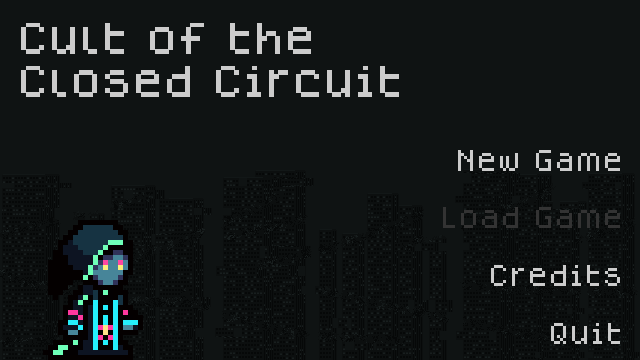
<style>
.page{position:relative;width:640px;height:360px;background:#0f1313}
.page>*{position:absolute;margin:0}
.t1{font:36px "Dogica_Pixel";color:#cccccc}
.t2{font:24px "Dogica_Pixel";color:#cccccc}
.t3{font:24px "Dogica_Pixel";color:#333333}
</style>
<div class="page">
<p class="t1" style="left:21px;top:23px;width:378px;height:74px">Cult of the<br>Closed Circuit</p>
<p class="t2" style="left:443px;top:150px;width:177px;height:194px;text-align:right">New Game<br><br><span class="t3">Load Game<br></span><br>Credits<br><br>Quit</p>
</div>
